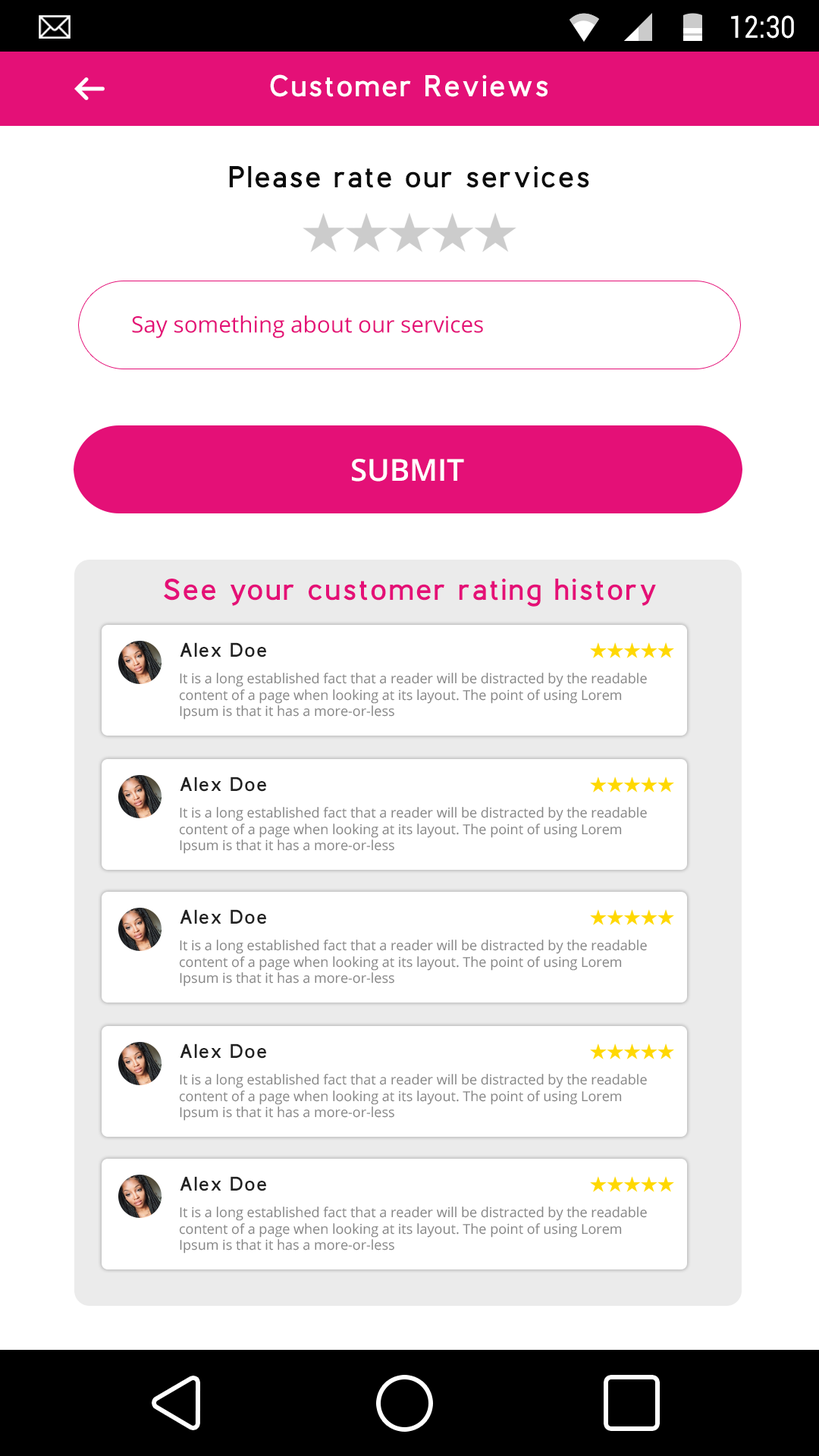
<style>
.page{position:relative;width:819px;height:1456px;background:#ffffff}
.page>*{position:absolute;margin:0}
.t1{font:30.5px "Roboto-Regular";color:#ffffff;scale:0.87 1}
.t2{font:30.3px "BerlinBold";letter-spacing:0.1em;color:#ffffff}
.t3{font:30.3px "BerlinBold";letter-spacing:0.1em;color:#0c0c0c}
.t4{font:22.6px "OpenSans";color:#e41077}
.t5{font:30.3px "OpenSans-Semibold";color:#ffffff}
.t6{font:30.3px "BerlinBold";letter-spacing:0.1em;color:#e41077}
.t7{font:19.7px "BerlinBold";letter-spacing:0.1em;color:#222222}
.t8{font:13.6px "OpenSans";color:#858585}
.t9{font:113.8px "OpenSans-Semibold";color:#858585}
</style>
<div class="page">
<p class="t1" style="left:731px;top:15px;width:63px;height:24px">12:30</p>
<p class="t2" style="left:270px;top:74px;width:278px;height:23px">Customer Reviews</p>
<p class="t3" style="left:229px;top:166px;width:360px;height:22px">Please rate our services</p>
<p class="t4" style="left:132px;top:315px;width:351px;height:23px">Say something about our services</p>
<p class="t5" style="left:352px;top:459px;width:112px;height:23px">SUBMIT</p>
<p class="t6" style="left:164px;top:579px;width:492px;height:28px">See your customer rating history</p>
<p class="t7" style="left:180px;top:642px;width:86px;height:15px">Alex Doe</p>
<p class="t8" style="left:179px;top:673px;width:468px;height:47px"><span class="t9">     <br></span>It is a long established fact that a reader will be distracted by the readable<br>content of a page when looking at its layout. The point of using Lorem <br>Ipsum is that it has a more-or-less</p>
<p class="t7" style="left:180px;top:777px;width:86px;height:15px">Alex Doe</p>
<p class="t8" style="left:179px;top:807px;width:468px;height:47px"><span class="t9">     <br></span>It is a long established fact that a reader will be distracted by the readable<br>content of a page when looking at its layout. The point of using Lorem <br>Ipsum is that it has a more-or-less</p>
<p class="t7" style="left:180px;top:909px;width:86px;height:15px">Alex Doe</p>
<p class="t8" style="left:179px;top:940px;width:468px;height:47px"><span class="t9">     <br></span>It is a long established fact that a reader will be distracted by the readable<br>content of a page when looking at its layout. The point of using Lorem <br>Ipsum is that it has a more-or-less</p>
<p class="t7" style="left:180px;top:1043px;width:86px;height:16px">Alex Doe</p>
<p class="t8" style="left:179px;top:1074px;width:468px;height:47px"><span class="t9">     <br></span>It is a long established fact that a reader will be distracted by the readable<br>content of a page when looking at its layout. The point of using Lorem <br>Ipsum is that it has a more-or-less</p>
<p class="t7" style="left:180px;top:1176px;width:86px;height:15px">Alex Doe</p>
<p class="t8" style="left:179px;top:1206px;width:468px;height:48px"><span class="t9">     <br></span>It is a long established fact that a reader will be distracted by the readable<br>content of a page when looking at its layout. The point of using Lorem <br>Ipsum is that it has a more-or-less</p>
</div>
